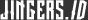
<style>
.page{position:relative;width:88px;height:20px;background:#333333}
.page>*{position:absolute;margin:0}
.t1{font:17px "NEOESPORTRegular";letter-spacing:0.075em;color:#ffffff;font-weight:bold}
.t2{font:17px "NEOESPORTRegular";letter-spacing:0.075em;color:#ffffff;font-weight:bold;font-style:italic}
</style>
<div class="page">
<p class="t1" style="left:0px;top:0px;width:87px;height:20px">JINGERS.<span class="t2">ID</span></p>
</div>
